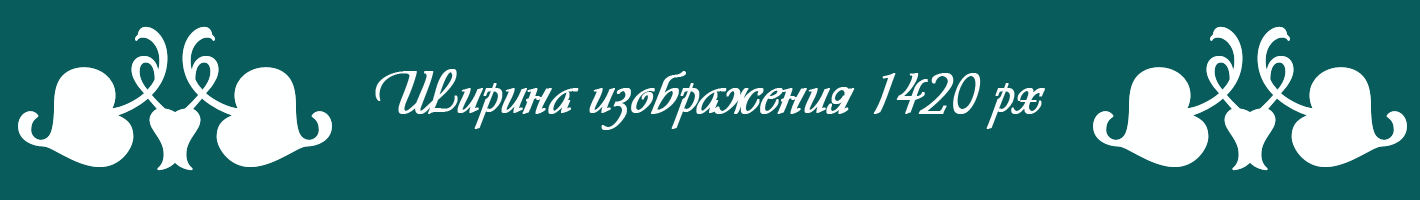
<style>
.page{position:relative;width:1420px;height:200px;background:#095c5c}
.page>*{position:absolute;margin:0}
.t1{font:60px "VivaldiDCL";color:#fcfcfc;font-weight:bold}
</style>
<div class="page">
<p class="t1" style="left:375px;top:69px;width:670px;height:61px">Ширина изображения 1420 px</p>
</div>
